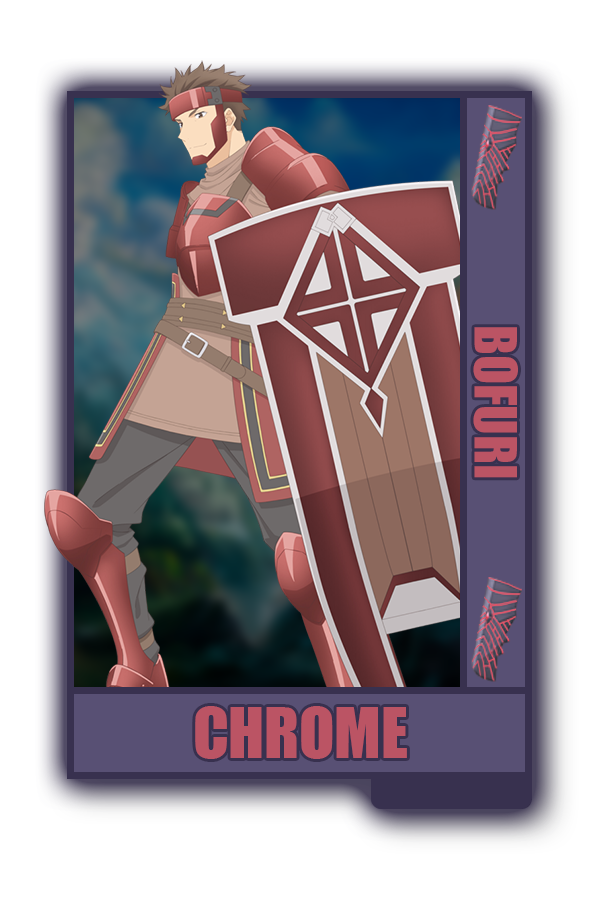
<style>
.page{position:relative;width:600px;height:900px;background:#ffffff}
.page>*{position:absolute;margin:0}
.t1{font:53.6px "Impact";color:#bb5464}
.t2{font:64.6px "Impact";color:#bb5464}
</style>
<div class="page">
<p class="t1" style="left:473px;top:327px;width:45px;height:151px;rotate:90deg">BOFURI</p>
<p class="t2" style="left:195px;top:706px;width:212px;height:53px">CHROME</p>
</div>
